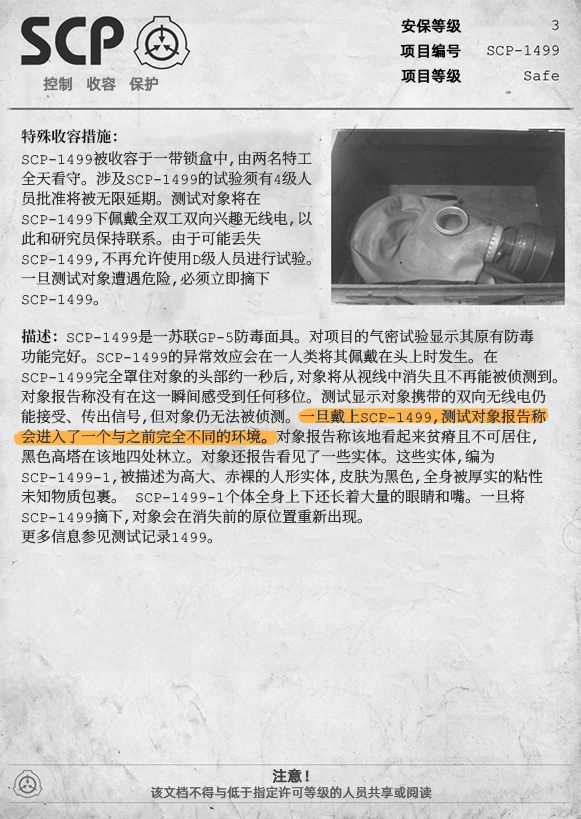
<style>
.page{position:relative;width:581px;height:819px}
.page>*{position:absolute;margin:0}
.t1{font:15px "AlibabaPuHuiTiR";color:#000000;font-weight:bold}
.t2{font:15px "AlibabaPuHuiTiR";color:#707070;font-weight:bold}
.t3{font:15px/20px "ContainmentBreach-Regular";color:#353535}
.t4{font:15px/22px "ContainmentBreach-Bold";color:#121212}
.t5{font:15px/20px "ContainmentBreach-Bold";color:#121212}
.t6{font:15px/20px "ContainmentBreach-Regular";color:#353535;font-weight:bold}
.t7{font:15px "AlibabaPuHuiTiR";color:#414141;font-weight:bold}
.t8{font:13px "AlibabaPuHuiTiR";color:#575757}
</style>
<div class="page">
<p class="t1" style="left:401px;top:18px;width:61px;height:15px">安保等级</p>
<p class="t1" style="left:400px;top:43px;width:61px;height:15px">项目编号</p>
<p class="t2" style="left:43px;top:76px;width:115px;height:15px">控制   收容   保护</p>
<p class="t1" style="left:401px;top:68px;width:61px;height:15px">项目等级</p>
<p class="t3" style="left:21px;top:129px;width:291px;height:177px"><span class="t4">特殊收容措施：<br></span>SCP-1499被收容于一带锁盒中，由两名特工<br>全天看守。涉及SCP-1499的试验须有4级人<br>员批准将被无限延期。测试对象将在<br>SCP-1499下佩戴全双工双向兴趣无线电，以<br>此和研究员保持联系。由于可能丢失<br>SCP-1499，不再允许使用D级人员进行试验。<br>一旦测试对象遭遇危险，必须立即摘下<br>SCP-1499。</p>
<p class="t3" style="left:21px;top:329px;width:536px;height:215px"><span class="t5">描述：</span>SCP-1499是一苏联GP-5防毒面具。对项目的气密试验显示其原有防毒<br>功能完好。SCP-1499的异常效应会在一人类将其佩戴在头上时发生。在<br>SCP-1499完全罩住对象的头部约一秒后，对象将从视线中消失且不再能被侦测到。<br>对象报告称没有在这一瞬间感受到任何移位。测试显示对象携带的双向无线电仍<br>能接受、传出信号，但对象仍无法被侦测。一旦戴上SCP-1499，测试对象报告称<br>会进入了一个与之前完全不同的环境<span class="t6">。</span>对象报告称该地看起来贫瘠且不可居住，<br>黑色高塔在该地四处林立。对象还报告看见了一些实体。这些实体，编为<br>SCP-1499-1，被描述为高大、赤裸的人形实体，皮肤为黑色，全身被厚实的粘性<br>未知物质包裹。 SCP-1499-1个体全身上下还长着大量的眼睛和嘴。一旦将<br>SCP-1499摘下，对象会在消失前的原位置重新出现。<br>更多信息参见测试记录1499。</p>
<p class="t7" style="left:272px;top:768px;width:37px;height:15px">注意！</p>
<p class="t8" style="left:151px;top:786px;width:281px;height:13px">该文档不得与低于指定许可等级的人员共享或阅读</p>
</div>
